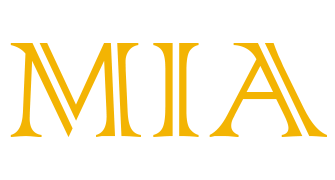
<style>
.page{position:relative;width:335px;height:180px;background:#ffffff}
.page>*{position:absolute;margin:0}
.t1{font:179.7px "ColonnaMT";color:#f3b403}
</style>
<div class="page">
<p class="t1" style="left:10px;top:43px;width:317px;height:94px">MIA</p>
</div>
